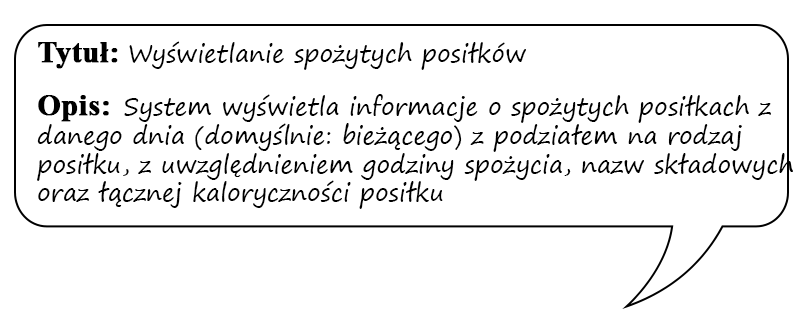
<style>
.page{position:relative;width:800px;height:325px;background:#ffffff}
.page>*{position:absolute;margin:0}
.t1{font:24px "SegoePrint";color:#000000}
.t2{font:30px "TimesNewRomanPS-BoldMT";color:#000000;font-weight:bold}
</style>
<div class="page">
<p class="t1" style="left:37px;top:41px;width:756px;height:168px"><span class="t2">Tytuł: </span>Wyświetlanie spożytych posiłków<br><br><span class="t2">Opis:  </span>System wyświetla informacje o spożytych posiłkach z danego dnia (domyślnie: bieżącego) z podziałem na rodzaj posiłku, z uwzględnieniem godziny spożycia, nazw składowych oraz łącznej kaloryczności posiłku</p>
</div>
